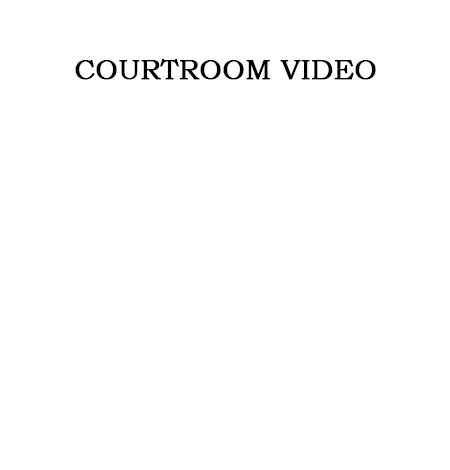
<style>
.page{position:relative;width:450px;height:470px;background:#ffffff}
.page>*{position:absolute;margin:0}
.t1{font:48px "BookmanOldStyle";letter-spacing:-0.01em;color:#000000;font-weight:bold}
</style>
<div class="page">
<p class="t1" style="left:75px;top:59px;width:301px;height:21px">COURTROOM VIDEO</p>
</div>
